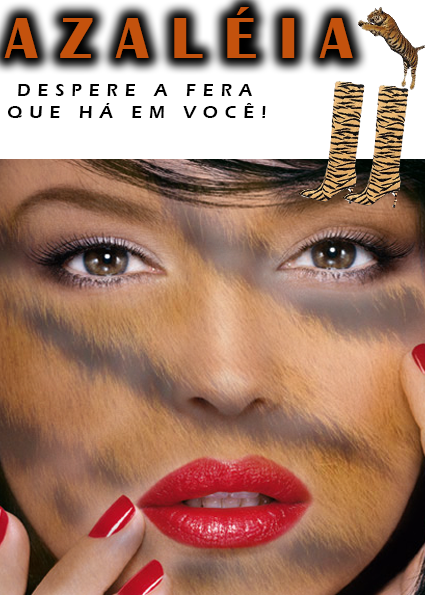
<style>
.page{position:relative;width:425px;height:595px}
.page>*{position:absolute;margin:0}
.t1{font:60px "BritannicBold";letter-spacing:0.38em;color:#c4520d;text-transform:uppercase}
.t2{font:18px "ErasITC-Demi";letter-spacing:0.38em;color:#000000;text-transform:uppercase}
</style>
<div class="page">
<p class="t1" style="left:4px;top:7px;width:349px;height:51px">Azaléia</p>
<p class="t2" style="left:8px;top:84px;width:258px;height:34px;text-align:center">Despere a ferA <br>QUE HÁ EM VOCÊ!</p>
</div>
